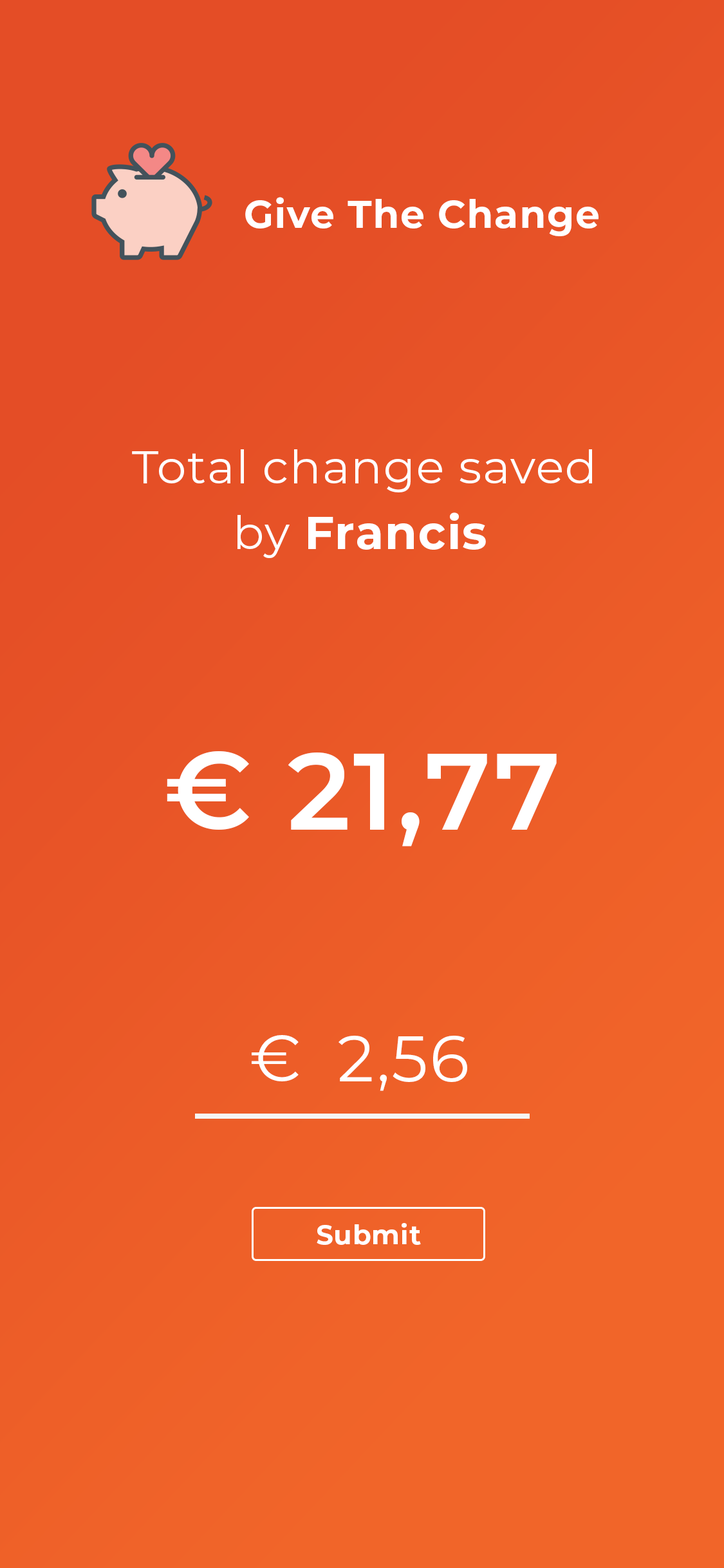
<style>
.page{position:relative;width:724px;height:1568px}
.page>*{position:absolute;margin:0}
.t1{font:38.6px "Montserrat-Bold";letter-spacing:0.025em;color:#ffffff}
.t2{font:46.3px "Montserrat-Regular";letter-spacing:0.025em;color:#ffffff}
.t3{font:46.3px "Montserrat-Bold";letter-spacing:0.025em;color:#ffffff}
.t4{font:108.9px "Montserrat-SemiBold";letter-spacing:0.025em;color:#ffffff}
.t5{font:64.4px "Montserrat-Regular";letter-spacing:0.025em;color:#ffffff}
.t6{font:26.8px "Montserrat-Bold";letter-spacing:0.025em;color:#ffffff}
</style>
<div class="page">
<p class="t1" style="left:245px;top:197px;width:354px;height:39px">Give The Change</p>
<p class="t2" style="left:132px;top:449px;width:460px;height:43px">Total change saved</p>
<p class="t3" style="left:238px;top:512px;width:248px;height:46px"><span class="t2">by </span>Francis</p>
<p class="t4" style="left:167px;top:751px;width:82px;height:79px">€</p>
<p class="t4" style="left:288px;top:752px;width:269px;height:94px">21,77</p>
<p class="t5" style="left:252px;top:1035px;width:47px;height:46px">€</p>
<p class="t5" style="left:339px;top:1036px;width:128px;height:55px">2,56</p>
<p class="t6" style="left:317px;top:1223px;width:104px;height:22px">Submit</p>
</div>
